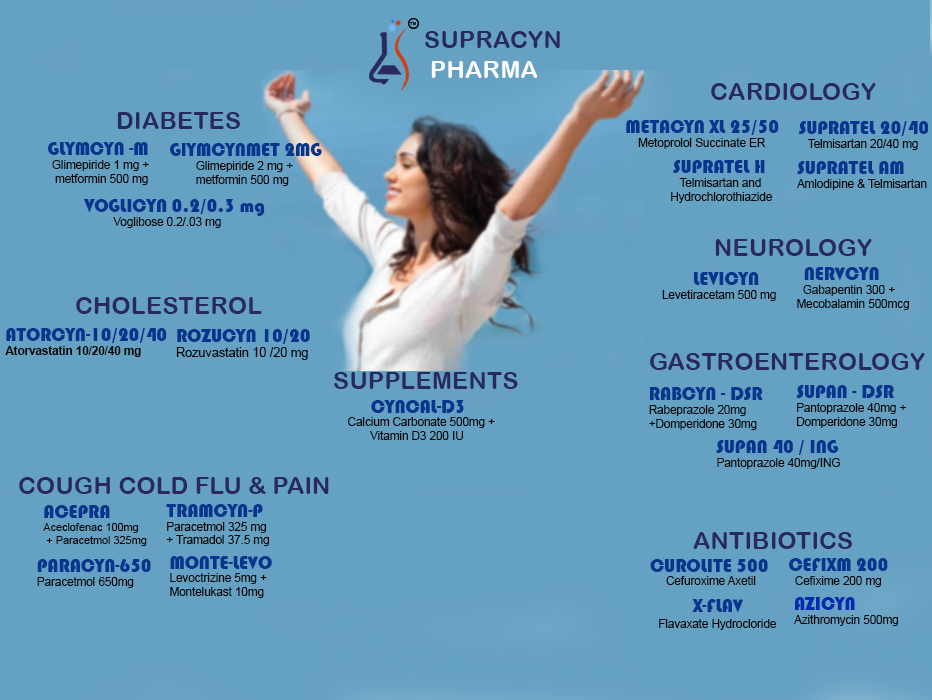
<style>
.page{position:relative;width:932px;height:700px;background:#65a1c3}
.page>*{position:absolute;margin:0}
.t1{font:4.4px "ArialRoundedMTBold";color:#000000;text-transform:uppercase}
.t2{font:24.5px "ArialRoundedMTBold";color:#29295f;text-transform:uppercase}
.t3{font:11.5px "ArialMT";color:#000000}
.t4{font:18.7px "Bauhaus93";color:#04368e}
.t5{font:18.8px "Bauhaus93";color:#04368e}
.t6{font:26px "SourceCodeRoman-Bold";color:#e00000}
.t7{font:11.5px "Arial-BoldMT";color:#000000}
.t8{font:12.6px "ArialMT";color:#000000}
.t9{font:23.3px "Bauhaus93";color:#c3641d}
.t10{font:25.1px "ArialRoundedMTBold";color:#cb2121}
.t11{font:10.8px "ArialMT";color:#000000}
.t12{font:11.5px/15.7px "ArialMT";color:#000000}
.t13{font:28.4px/15.7px "TwCenMT-CondensedExtraBold";color:#c21c1c}
.t14{font:18.7px/15.7px "Bauhaus93";color:#04368e}
.t15{font:18.8px "Bauhaus93";color:#002daf}
</style>
<div class="page">
<p class="t1" style="left:409px;top:22px;width:7px;height:3px">TM</p>
<p class="t2" style="left:711px;top:83px;width:165px;height:17px">cardiology</p>
<p class="t2" style="left:117px;top:112px;width:123px;height:17px">diabetes</p>
<p class="t3" style="left:626px;top:120px;width:153px;height:29px"><span class="t4">METACYN XL 25/50<br></span>    Metoprolol Succinate ER</p>
<p class="t3" style="left:799px;top:121px;width:130px;height:29px"><span class="t5">SUPRATEL 20/40<br></span>   Telmisartan 20/40 mg</p>
<p class="t3" style="left:48px;top:142px;width:101px;height:43px"><span class="t4">          GLYMCYN -M<br></span>                Glimepiride 1 mg +<br>                 metformin 500 mg</p>
<p class="t3" style="left:170px;top:143px;width:152px;height:43px"><span class="t4">    GlYMCYNMET 2MG<br></span>              Glimepiride 2 mg +<br>              metformin 500 mg</p>
<p class="t3" style="left:671px;top:160px;width:101px;height:43px"><span class="t5">      SUPRATEL H<br></span>           Telmisartan and <br>        Hydrochlorothiazide</p>
<p class="t3" style="left:797px;top:161px;width:130px;height:29px"><span class="t5">SUPRATEL AM<br></span>Amlodipine &amp; Telmisartan</p>
<p class="t3" style="left:83px;top:199px;width:182px;height:29px"><span class="t4">VOGLICYN 0.2/0.3 mg<br></span>         Voglibose 0.2/.03 mg</p>
<p class="t2" style="left:715px;top:239px;width:157px;height:17px">neurology</p>
<p class="t3" style="left:797px;top:267px;width:112px;height:43px"><span class="t5">     NERVCYN<br></span>       Gabapentin 300 +<br>     Mecobalamin 500mcg</p>
<p class="t3" style="left:662px;top:272px;width:114px;height:29px"><span class="t6">  </span><span class="t4">LEVICYN<br></span>Levetiracetam 500 mg</p>
<p class="t2" style="left:76px;top:297px;width:186px;height:17px">cholesterol</p>
<p class="t7" style="left:5px;top:328px;width:162px;height:29px"><span class="t5">ATORCYN-10/20/40<br></span>Atorvastatin 10/20/40 mg</p>
<p class="t8" style="left:176px;top:329px;width:134px;height:31px"><span class="t4">ROZUCYN 10/20<br></span>Rozuvastatin 10 /20 mg</p>
<p class="t2" style="left:650px;top:353px;width:275px;height:17px">gastroenterology</p>
<p class="t2" style="left:334px;top:372px;width:184px;height:17px">Supplements</p>
<p class="t3" style="left:649px;top:387px;width:114px;height:43px"><span class="t5">RABCYN - DSR<br></span>Rabeprazole 20mg <br>+Domperidone 30mg</p>
<p class="t3" style="left:796px;top:385px;width:110px;height:43px"><span class="t4">SUPAN - DSR<br></span>Pantoprazole 40mg +<br>Domperidone 30mg</p>
<p class="t3" style="left:348px;top:400px;width:147px;height:40px"><span class="t9">    </span><span class="t5">CYNCAL-D3<br></span>Calcium Carbonate 500mg +<br>       Vitamin D3 200 IU</p>
<p class="t3" style="left:716px;top:440px;width:124px;height:29px"><span class="t10">   </span><span class="t4">SUPAN 40 / ING <br></span>      Pantoprazole 40mg/ING</p>
<p class="t2" style="left:19px;top:477px;width:310px;height:17px">Cough Cold Flu &amp; Pain</p>
<p class="t11" style="left:43px;top:505px;width:104px;height:41px"><span class="t4">ACEPRA<br></span>Aceclofenac 100mg<br> + Paracetmol 325mg</p>
<p class="t3" style="left:166px;top:504px;width:103px;height:42px"><span class="t4">TRAMCYN-P<br></span>Paracetmol 325 mg <br>+ Tramadol 37.5 mg</p>
<p class="t2" style="left:693px;top:532px;width:159px;height:17px">antibiotics</p>
<p class="t3" style="left:37px;top:558px;width:114px;height:30px"><span class="t5">PARACYN-650<br></span>Paracetmol 650mg</p>
<p class="t3" style="left:170px;top:556px;width:102px;height:42px"><span class="t5">MONTE-LEVO<br></span>Levoctrizine 5mg +<br>Montelukast 10mg</p>
<p class="t3" style="left:789px;top:558px;width:99px;height:29px"><span class="t4">CEFIXM 200<br></span>  Cefixime 200 mg</p>
<p class="t3" style="left:650px;top:559px;width:118px;height:26px"><span class="t4">CUROLITE 500<br></span>     Cefuroxime Axetil</p>
<p class="t12" style="left:659px;top:599px;width:117px;height:31px"><span class="t13">     </span><span class="t14">X-FLAV<br></span>Flavaxate Hydrocloride</p>
<p class="t3" style="left:794px;top:597px;width:104px;height:29px"><span class="t15">AZICYN <br></span>Azithromycin 500mg</p>
</div>
